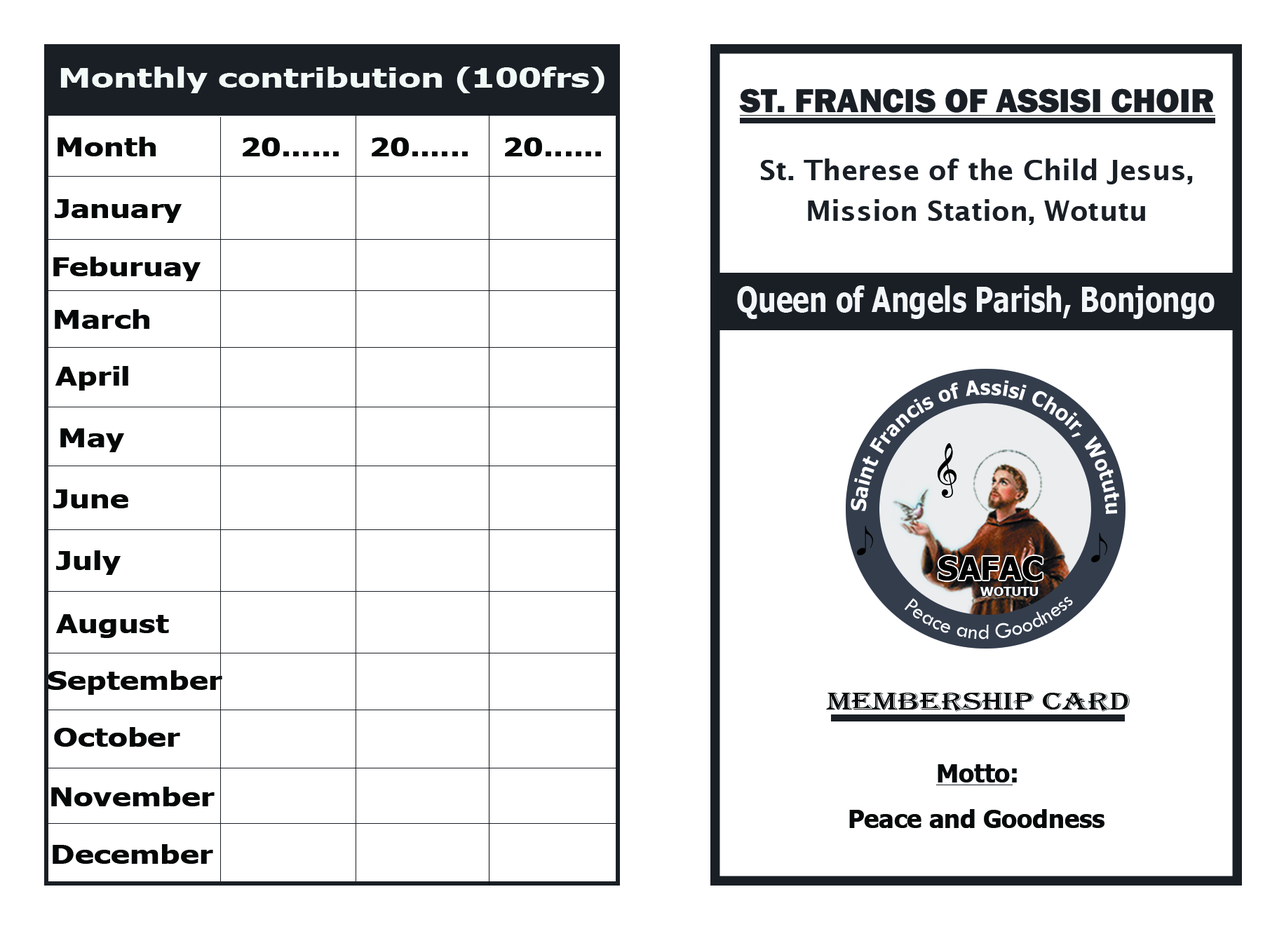
<style>
.page{position:relative;width:1284px;height:929px;background:#ffffff}
.page>*{position:absolute;margin:0}
.t1{font:27.5px "Tahoma-Bold";color:#f2faf7;scale:1.33 1}
.t2{font:34.3px "FranklinGothic-Heavy";color:#1a1f25}
.t3{font:26px "Tahoma-Bold";color:#060808;scale:1.22 1}
.t4{font:28.1px/40.6px "LucidaSans-Demi";color:#1a1f25}
.t5{font:35.1px "Tahoma-Bold";color:#f3f6f9;scale:0.8 1}
.t6{font:32.4px "Tahoma-Bold";color:#000000}
.t7{font:13px "Tahoma-Bold";color:#fefefe}
.t8{font:22.4px "TwCenMT-Regular";color:#ffffff}
.t9{font:26px "Tahoma-Bold";color:#060808;scale:1.23 1}
.t10{font:25px "Algerian";color:#080a0a;scale:1.37 1}
.t11{font:25px "Tahoma-Bold";color:#080b0b}
.t12{font:25px "Tahoma-Bold";color:#080a0a}
</style>
<div class="page">
<p class="t1" style="left:60px;top:67px;width:544px;height:26px">Monthly contribution (100frs)</p>
<p class="t2" style="left:739px;top:88px;width:474px;height:25px">ST. FRANCIS OF ASSISI CHOIR</p>
<p class="t3" style="left:57px;top:137px;width:99px;height:19px">Month</p>
<p class="t3" style="left:243px;top:137px;width:96px;height:19px">20......</p>
<p class="t3" style="left:372px;top:137px;width:96px;height:19px">20......</p>
<p class="t3" style="left:505px;top:137px;width:96px;height:19px">20......</p>
<p class="t4" style="left:761px;top:158px;width:432px;height:67px;text-align:center">St. Therese of the Child Jesus,<br>Mission Station, Wotutu</p>
<p class="t3" style="left:55px;top:199px;width:127px;height:24px">January</p>
<p class="t3" style="left:53px;top:257px;width:148px;height:24px">Feburuay</p>
<p class="t5" style="left:737px;top:285px;width:477px;height:34px">Queen of Angels Parish, Bonjongo</p>
<p class="t3" style="left:55px;top:309px;width:94px;height:20px">March</p>
<p class="t3" style="left:55px;top:366px;width:73px;height:24px">April</p>
<p class="t3" style="left:60px;top:428px;width:64px;height:24px">May</p>
<p class="t3" style="left:53px;top:489px;width:75px;height:19px">June</p>
<p class="t3" style="left:56px;top:550px;width:65px;height:25px">July</p>
<p class="t6" style="left:938px;top:556px;width:104px;height:24px">SAFAC</p>
<p class="t7" style="left:979px;top:587px;width:59px;height:9px">WOTUTU</p>
<p class="t8" style="left:904px;top:597px;width:169px;height:42px;rotate:80deg">Peace and Goodness</p>
<p class="t3" style="left:56px;top:614px;width:113px;height:24px">August</p>
<p class="t9" style="left:48px;top:670px;width:174px;height:25px">September</p>
<p class="t10" style="left:826px;top:693px;width:303px;height:19px">MEMBERSHIP CARD</p>
<p class="t9" style="left:54px;top:727px;width:126px;height:20px">October</p>
<p class="t11" style="left:937px;top:764px;width:80px;height:18px">Motto:</p>
<p class="t9" style="left:51px;top:787px;width:164px;height:19px">November</p>
<p class="t12" style="left:849px;top:809px;width:255px;height:19px">Peace and Goodness</p>
<p class="t9" style="left:53px;top:844px;width:160px;height:20px">December</p>
</div>
